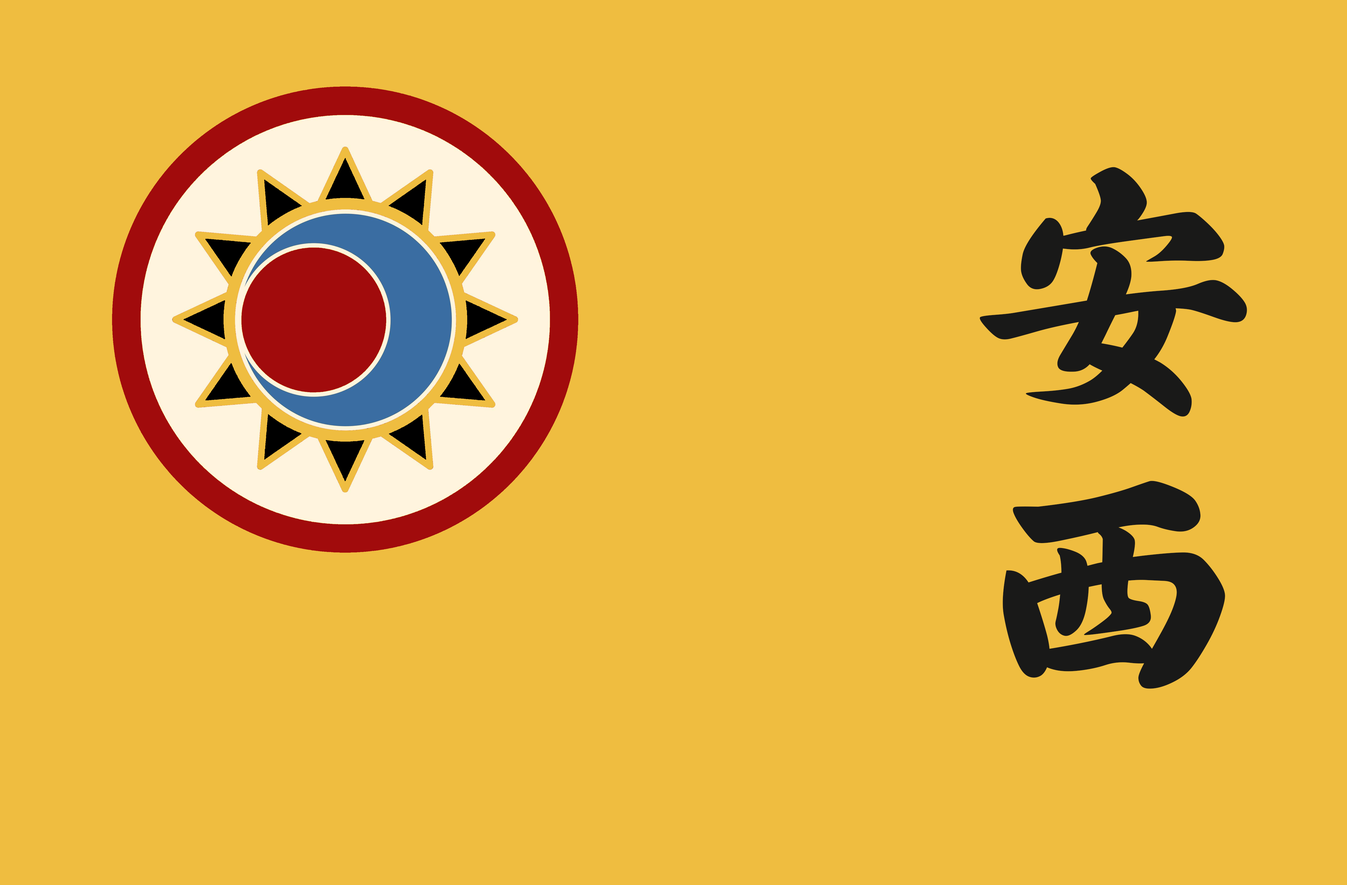
<style>
.page{position:relative;width:1347px;height:885px;background:#efbd40}
.page>*{position:absolute;margin:0}
.t1{font:316px "HBSMDBS--GB1-0";color:#191918}
</style>
<div class="page">
<p class="t1" style="left:980px;top:167px;width:267px;height:522px">安西</p>
</div>
